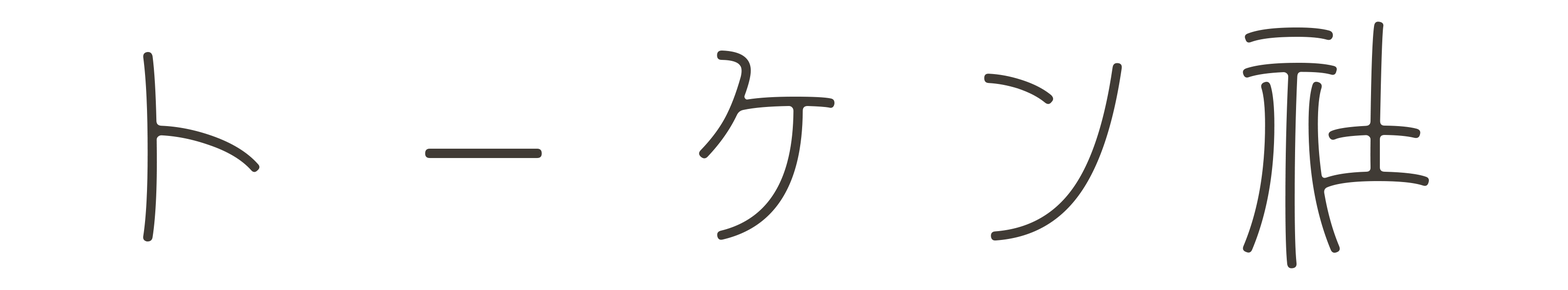
<style>
.page{position:relative;width:1568px;height:290px;background:#ffffff}
.page>*{position:absolute;margin:0}
.t1{font:263.5px "HakusyuSyoutenNenga";letter-spacing:0.08em;color:#403b35}
</style>
<div class="page">
<p class="t1" style="left:143px;top:22px;width:1286px;height:246px">トーケン社</p>
</div>
